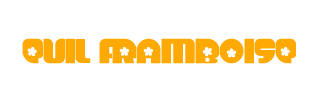
<style>
.page{position:relative;width:320px;height:100px;background:#ffffff}
.page>*{position:absolute;margin:0}
.t1{font:48px "Chick";color:#ffa904}
</style>
<div class="page">
<p class="t1" style="left:22px;top:38px;width:274px;height:26px">EVIL FRAMBOISE</p>
</div>
